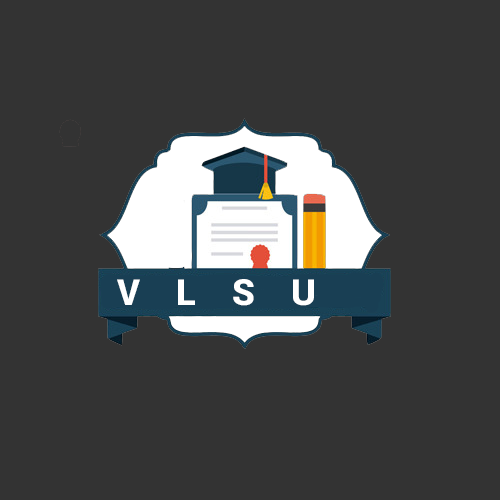
<style>
.page{position:relative;width:500px;height:500px;background:#333333}
.page>*{position:absolute;margin:0}
.t1{font:36px "Roboto-Black";letter-spacing:1em;color:#ffffff}
</style>
<div class="page">
<p class="t1" style="left:117px;top:279px;width:197px;height:27px">VLSU</p>
</div>
